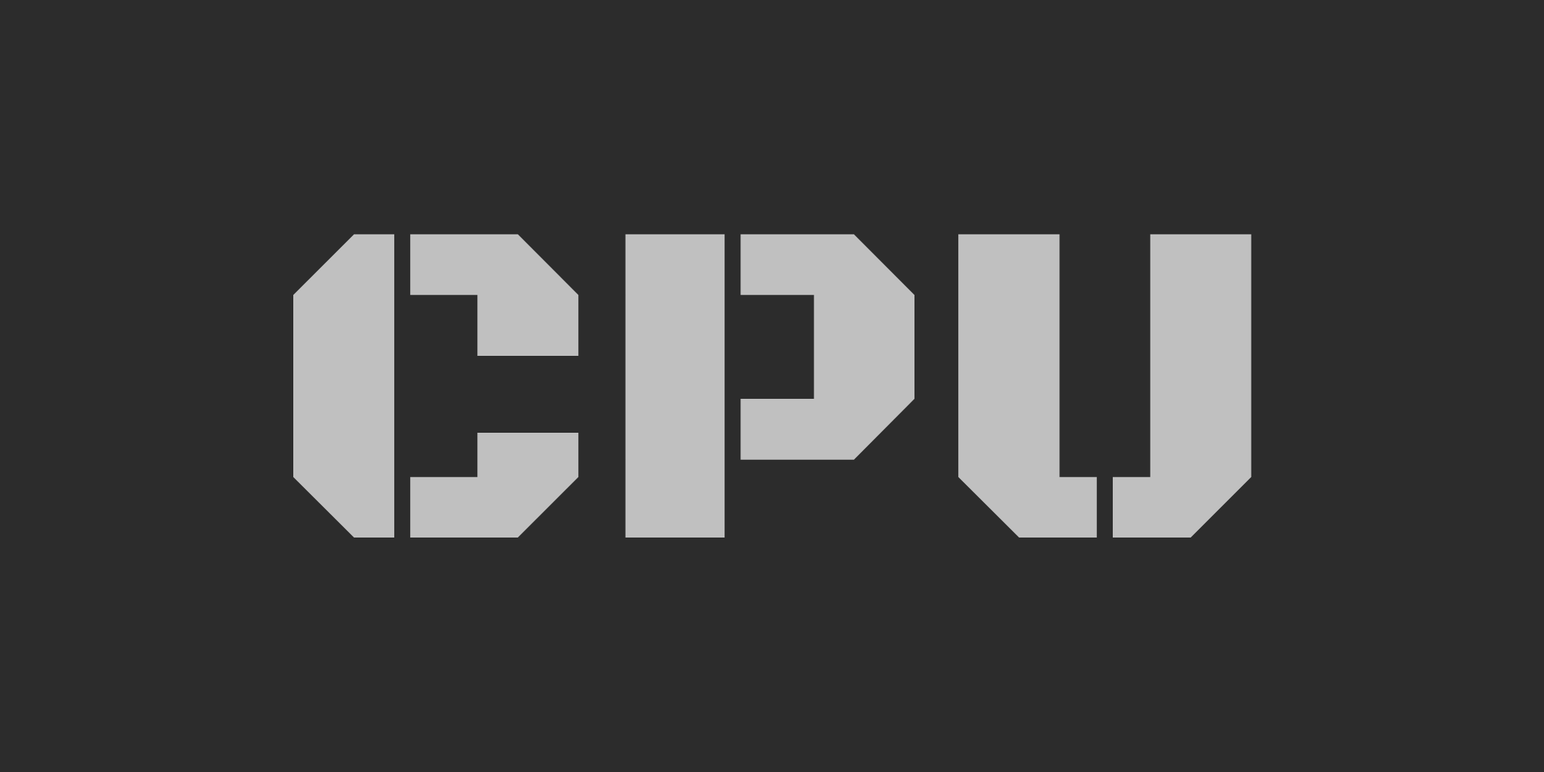
<style>
.page{position:relative;width:1544px;height:772px;background:#2c2c2c}
.page>*{position:absolute;margin:0}
.t1{font:468px "BlackOpsOne-Regular";color:#c0c0c0}
</style>
<div class="page">
<p class="t1" style="left:293px;top:234px;width:959px;height:304px">CPU</p>
</div>
